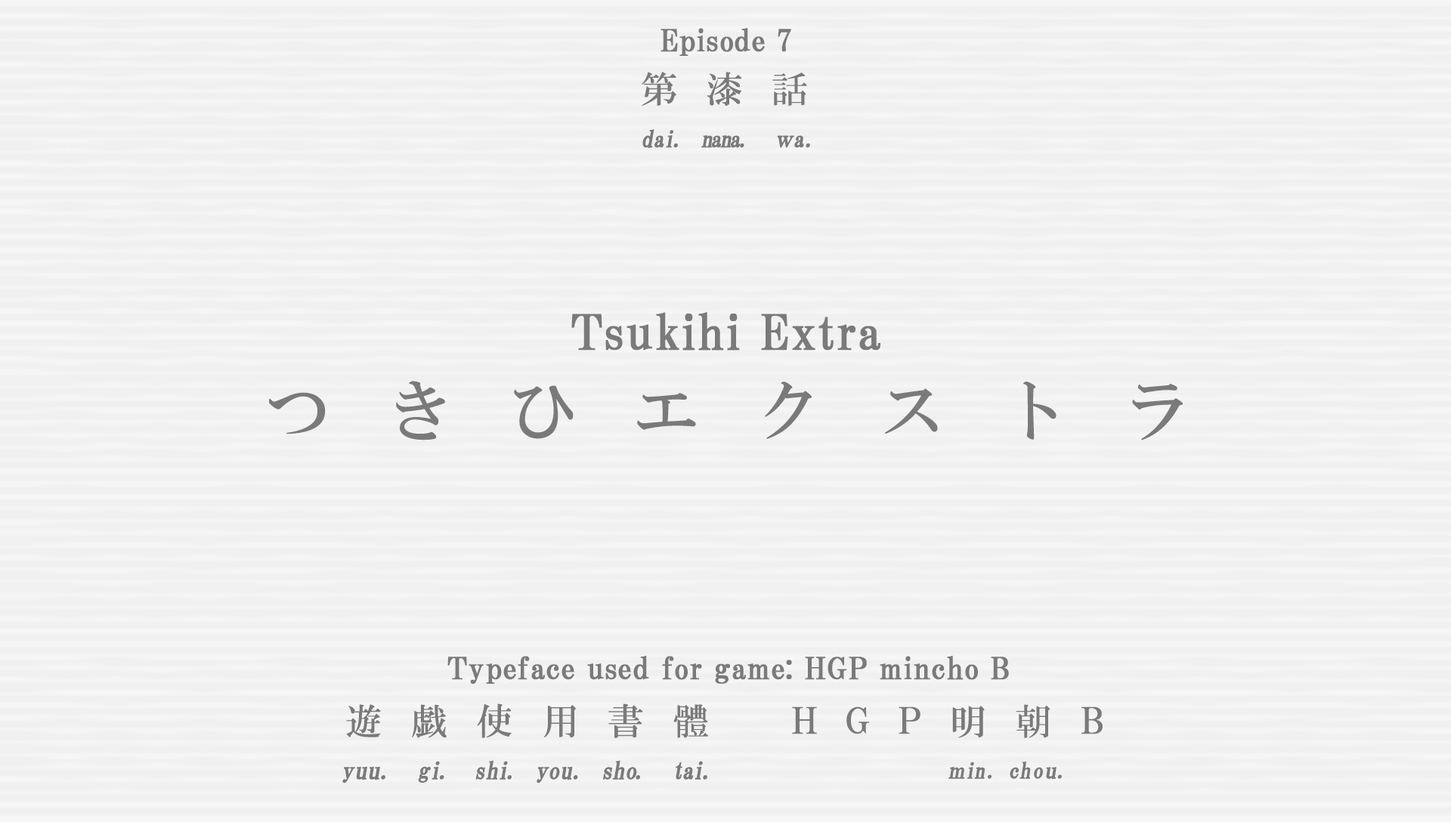
<style>
.page{position:relative;width:1451px;height:822px;background:#f0f0f0}
.page>*{position:absolute;margin:0}
.t1{font:30.2px "HGPMinchoB";letter-spacing:0.01em;color:#7a7a7a;font-weight:bold}
.t2{font:36.5px "HGMinchoB";letter-spacing:0.79em;color:#7a7a7a}
.t3{font:23.2px "HGMinchoB";letter-spacing:-0.1em;color:#7a7a7a;font-weight:bold;scale:0.96 1}
.t4{font:23.2px "HGMinchoB";color:#7a7a7a;font-weight:bold;scale:0.96 1}
.t5{font:23.2px "HGMinchoB";letter-spacing:-0.075em;color:#7a7a7a;font-weight:bold;scale:0.96 1}
.t6{font:23.2px "HGMinchoB";letter-spacing:0.07em;color:#7a7a7a;font-weight:bold;scale:0.96 1}
.t7{font:23.2px "HGMinchoB";letter-spacing:-0.05em;color:#7a7a7a;font-weight:bold;scale:0.86 1}
.t8{font:48.4px "HGPMinchoB";letter-spacing:0.01em;color:#7a7a7a;font-weight:bold}
.t9{font:65.7px "HGMinchoB";letter-spacing:0.87em;color:#7a7a7a}
.t10{font:36.3px "HGMinchoB";letter-spacing:0.81em;color:#7a7a7a}
.t11{font:36.3px "HGMinchoB";letter-spacing:0.8em;color:#7a7a7a}
.t12{font:36.3px "HGMinchoB";letter-spacing:0.79em;color:#7a7a7a}
.t13{font:36.3px "HGMinchoB";letter-spacing:0.71em;color:#7a7a7a;scale:0.85 1}
.t14{font:36.3px "HGMinchoB";letter-spacing:0.53em;color:#7a7a7a}
.t15{font:24.2px "HGMinchoB";color:#7a7a7a;font-weight:bold}
.t16{font:24.2px "HGMinchoB";letter-spacing:0.025em;color:#7a7a7a;font-weight:bold;scale:0.96 1}
.t17{font:24.2px "HGMinchoB";letter-spacing:0.075em;color:#7a7a7a;font-weight:bold;scale:0.96 1}
.t18{font:24.2px "HGMinchoB";letter-spacing:-0.025em;color:#7a7a7a;font-weight:bold;scale:0.96 1}
.t19{font:24.2px "HGMinchoB";letter-spacing:-0.11em;color:#7a7a7a;font-weight:bold;scale:0.96 1}
.t20{font:24.2px "HGMinchoB";color:#7a7a7a;font-weight:bold;scale:0.96 1}
.t21{font:24.2px "HGMinchoB";letter-spacing:-0.05em;color:#7a7a7a;font-weight:bold;scale:0.96 1}
.t22{font:24.2px "HGMinchoB";letter-spacing:-0.12em;color:#7a7a7a;font-weight:bold;scale:0.96 1}
.t23{font:24.2px "HGMinchoB";letter-spacing:-0.01em;color:#7a7a7a;font-weight:bold;scale:0.96 1}
.t24{font:24.2px "HGMinchoB";letter-spacing:0.005em;color:#7a7a7a;font-weight:bold;scale:0.96 1}
.t25{font:24.2px "HGMinchoB";letter-spacing:-0.09em;color:#7a7a7a;font-weight:bold;scale:0.96 1}
.t26{font:24.2px "HGMinchoB";letter-spacing:-0.075em;color:#7a7a7a;font-weight:bold;scale:0.96 1}
.t27{font:24.2px "HGMinchoB";letter-spacing:-0.1em;color:#7a7a7a;font-weight:bold;scale:0.96 1}
.t28{font:22px "HGMinchoB";letter-spacing:0.07em;color:#7a7a7a;font-weight:bold;scale:0.96 1}
.t29{font:22px "HGMinchoB";letter-spacing:-0.075em;color:#7a7a7a;font-weight:bold;scale:0.83 1}
.t30{font:22px "HGMinchoB";letter-spacing:-0.075em;color:#7a7a7a;font-weight:bold;scale:0.96 1}
.t31{font:22px "HGMinchoB";color:#7a7a7a;font-weight:bold;scale:0.96 1}
.t32{font:22px "HGMinchoB";letter-spacing:0.05em;color:#7a7a7a;font-weight:bold;scale:0.96 1}
.t33{font:22px "HGMinchoB";letter-spacing:0.01em;color:#7a7a7a;font-weight:bold;scale:1.06 1}
</style>
<div class="page">
<p class="t1" style="left:660px;top:28px;width:131px;height:28px">Episode 7</p>
<p class="t2" style="left:641px;top:72px;width:166px;height:34px">第漆話</p>
<p class="t3" style="left:642px;top:129px;width:168px;height:19px"><span class="t4">d</span><span class="t5">a</span>i<span class="t6">. </span>nana<span class="t6">.  </span><span class="t7">ｗ</span><span class="t4">a</span><span class="t6">.</span></p>
<p class="t8" style="left:571px;top:312px;width:309px;height:39px">Tsukihi Extra</p>
<p class="t9" style="left:269px;top:381px;width:913px;height:59px">つきひエクストラ</p>
<p class="t1" style="left:447px;top:656px;width:562px;height:28px">Typeface used for game: HGP mincho B</p>
<p class="t10" style="left:346px;top:703px;width:362px;height:35px">遊<span class="t11">戯</span>使<span class="t12">用</span>書體</p>
<p class="t13" style="left:792px;top:706px;width:310px;height:28px">ＨＧＰ    Ｂ</p>
<p class="t12" style="left:952px;top:704px;width:97px;height:34px">明<span class="t14">朝</span></p>
<p class="t15" style="left:342px;top:760px;width:365px;height:23px"><span class="t16">y</span>uu<span class="t17">. </span><span class="t18">g</span><span class="t19">i</span><span class="t17">. </span><span class="t20">s</span><span class="t21">h</span><span class="t22">i</span><span class="t17">. </span><span class="t23">y</span><span class="t24">ou</span><span class="t17">. </span><span class="t18">s</span><span class="t20">h</span><span class="t25">o</span><span class="t17">.  </span><span class="t26">t</span><span class="t27">ai</span><span class="t17">.</span></p>
<p class="t28" style="left:948px;top:761px;width:114px;height:19px"><span class="t29">ｍ</span><span class="t30">i</span>n. <span class="t31">c</span>h<span class="t32">o</span><span class="t33">u</span>.</p>
</div>
